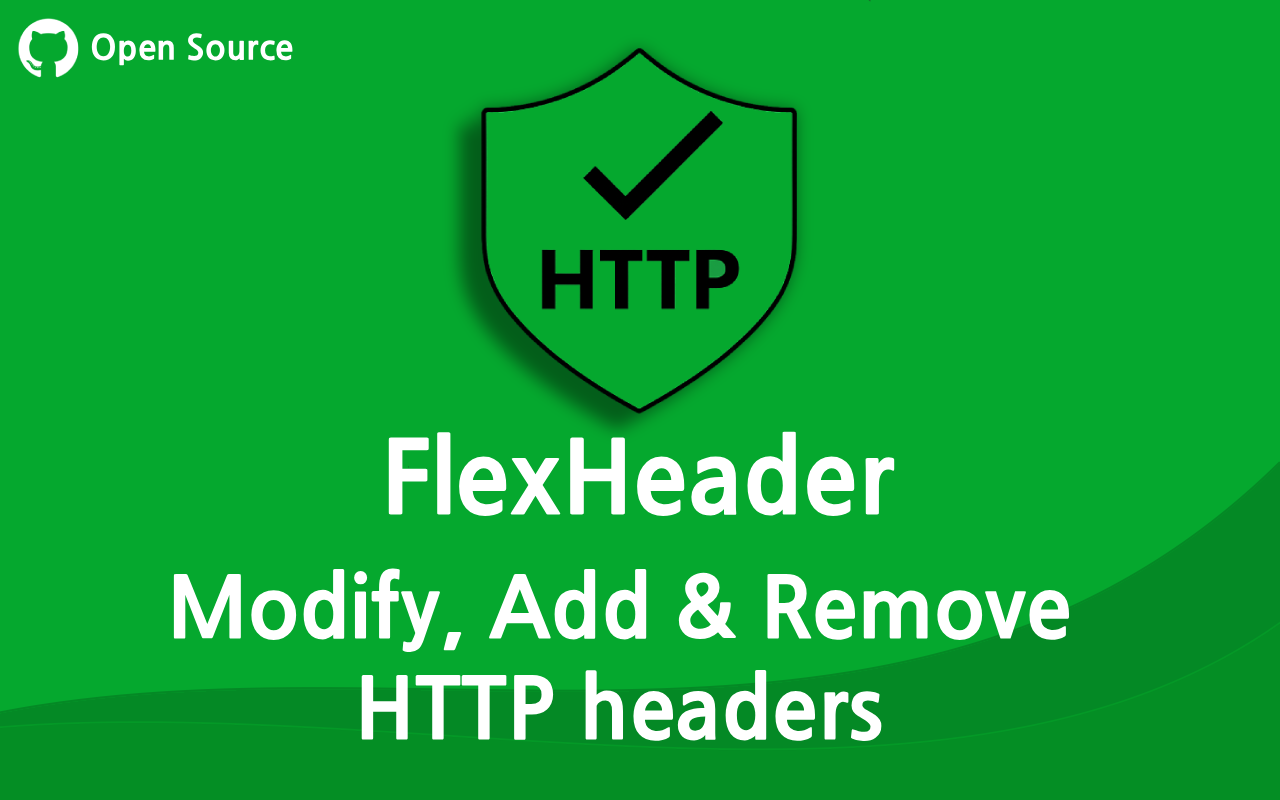
<style>
.page{position:relative;width:1280px;height:800px;background:#05a82e}
.page>*{position:absolute;margin:0}
.t1{font:34px "NanumGothicExtraBold";color:#ffffff}
.t2{font:100px "NanumGothicExtraBold";color:#ffffff}
.t3{font:84px "NanumGothicExtraBold";color:#ffffff}
</style>
<div class="page">
<p class="t1" style="left:91px;top:33px;width:202px;height:33px">Open Source</p>
<p class="t2" style="left:388px;top:431px;width:507px;height:85px">FlexHeader</p>
<p class="t3" style="left:173px;top:568px;width:897px;height:173px;text-align:center">Modify, Add &amp; Remove<br>HTTP headers</p>
</div>
